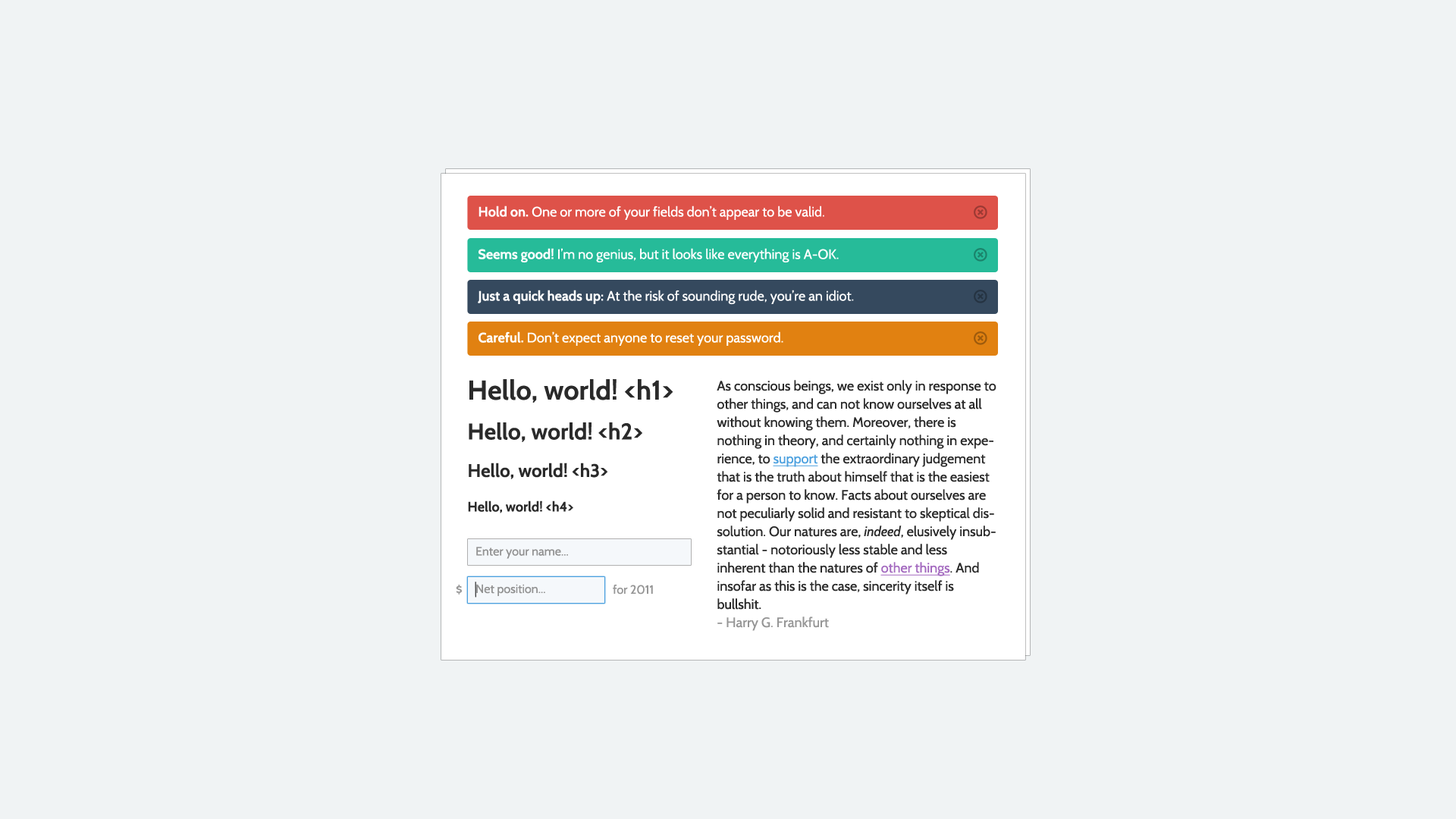
<style>
.page{position:relative;width:1456px;height:819px;background:#f0f3f4}
.page>*{position:absolute;margin:0}
.t1{font:13.6px "Cabin-Regular";color:#ffffff}
.t2{font:13.6px "Cabin-Bold";color:#ffffff}
.t3{font:27.3px "Cabin-Bold";color:#2a2a2a}
.t4{font:13.6px/18.2px "Cabin-Regular";color:#2a2a2a}
.t5{font:13.6px/18.2px "Cabin-Regular";color:#4da1df;text-decoration:underline}
.t6{font:13.6px/18.2px "Cabin-Italic";color:#2a2a2a}
.t7{font:13.6px/18.2px "Cabin-Regular";color:#a369bf;text-decoration:underline}
.t8{font:13.6px/18.2px "Cabin-Regular";color:#969696}
.t9{font:22.7px "Cabin-Bold";color:#2a2a2a}
.t10{font:18.2px "Cabin-Bold";color:#2a2a2a}
.t11{font:13.6px "Cabin-Bold";color:#2a2a2a}
.t12{font:12.1px "Cabin-Regular";color:#929292}
.t13{font:12.1px "Cabin-Regular";color:#969696}
</style>
<div class="page">
<p class="t1" style="left:479px;top:206px;width:345px;height:14px"><span class="t2">Hold on.</span> One or more of your fields don’t appear to be valid.</p>
<p class="t1" style="left:479px;top:248px;width:360px;height:15px"><span class="t2">Seems good!</span> I’m no genius, but it looks like everything is A-OK.</p>
<p class="t1" style="left:478px;top:290px;width:376px;height:15px"><span class="t2">Just a quick heads up:</span> At the risk of sounding rude, you’re an idiot.</p>
<p class="t1" style="left:479px;top:331px;width:304px;height:15px"><span class="t2">Careful.</span> Don’t expect anyone to reset your password.</p>
<p class="t3" style="left:469px;top:379px;width:204px;height:24px">Hello, world! &lt;h1&gt;</p>
<p class="t4" style="left:717px;top:380px;width:279px;height:251px">As conscious beings, we exist only in response to other things, and can not know ourselves at all without knowing them. Moreover, there is nothing in theory, and certainly nothing in experience, to <span class="t5">support</span> the extraordinary judgement that is the truth about himself that is the easiest for a person to know. Facts about ourselves are not peculiarly solid and resistant to skeptical dissolution. Our natures are, <span class="t6">indeed</span>, elusively insubstantial - notoriously less stable and less inherent than the natures of <span class="t7">other things</span>. And insofar as this is the case, sincerity itself is bullshit.<br><span class="t8">- Harry G. Frankfurt</span></p>
<p class="t9" style="left:469px;top:422px;width:173px;height:20px">Hello, world! &lt;h2&gt;</p>
<p class="t10" style="left:469px;top:463px;width:139px;height:16px">Hello, world! &lt;h3&gt;</p>
<p class="t11" style="left:468px;top:500px;width:105px;height:13px">Hello, world! &lt;h4&gt;</p>
<p class="t12" style="left:476px;top:547px;width:92px;height:12px">Enter your name...</p>
<p class="t13" style="left:456px;top:585px;width:6px;height:10px">$</p>
<p class="t12" style="left:476px;top:584px;width:69px;height:12px">Net position...</p>
<p class="t13" style="left:613px;top:584px;width:40px;height:11px">for 2011</p>
</div>
